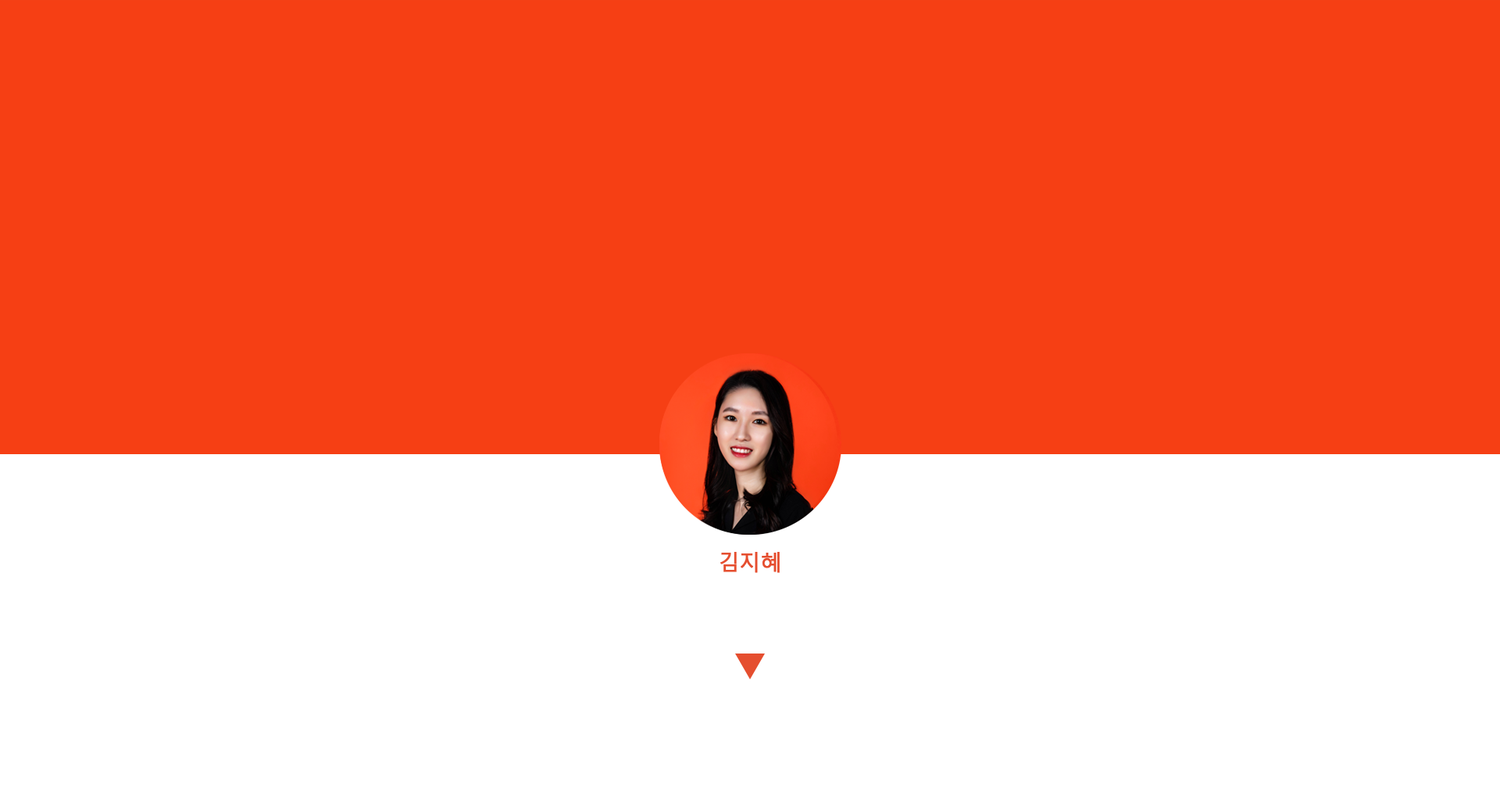
<style>
.page{position:relative;width:1500px;height:795px;background:#f63f14}
.page>*{position:absolute;margin:0}
.t1{font:20.8px "MalgunGothic";color:#e54e2f;font-weight:bold}
</style>
<div class="page">
<p class="t1" style="left:721px;top:552px;width:59px;height:21px">김지혜</p>
</div>
